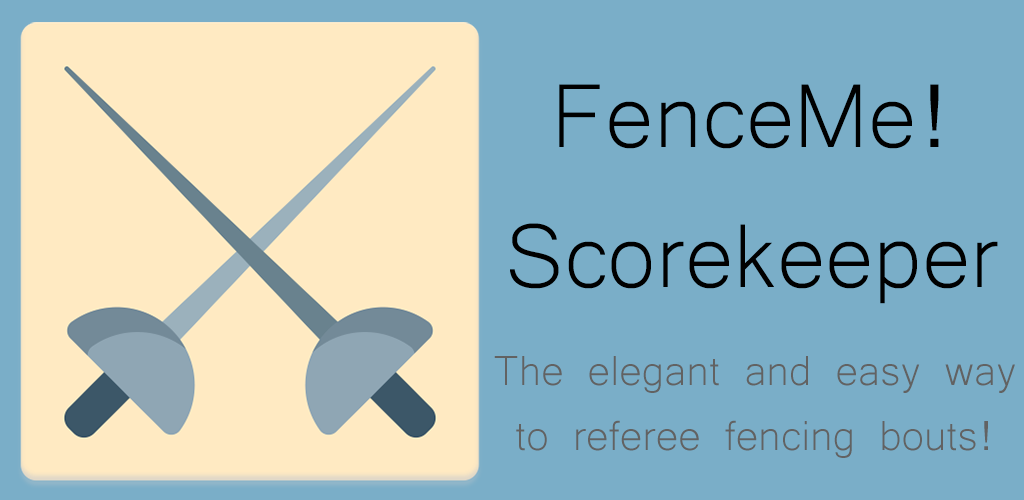
<style>
.page{position:relative;width:1024px;height:500px;background:#7aaec8}
.page>*{position:absolute;margin:0}
.t1{font:116.7px "Microsoft-Yi-Baiti";color:#000000}
.t2{font:54.2px "Microsoft-Yi-Baiti";color:#626262}
</style>
<div class="page">
<p class="t1" style="left:510px;top:84px;width:488px;height:220px;text-align:center">FenceMe!<br>Scorekeeper</p>
<p class="t2" style="left:494px;top:356px;width:521px;height:102px;text-align:center">The elegant and easy way<br>to referee fencing bouts!</p>
</div>
